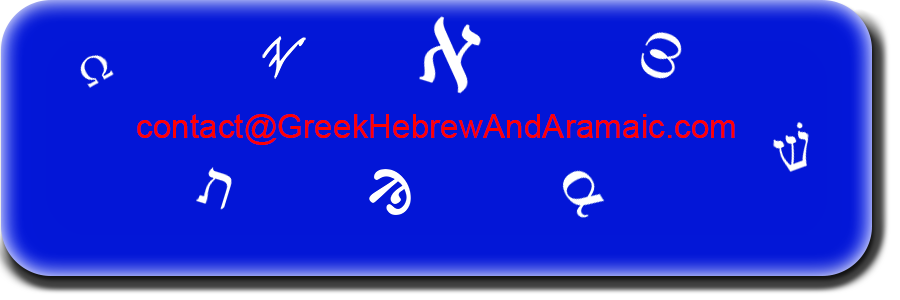
<style>
.page{position:relative;width:900px;height:300px;background:#0316d7}
.page>*{position:absolute;margin:0}
.t1{font:33.3px "ArialMT";color:#ff0000}
</style>
<div class="page">
<p class="t1" style="left:137px;top:114px;width:598px;height:31px">contact@GreekHebrewAndAramaic.com</p>
</div>
